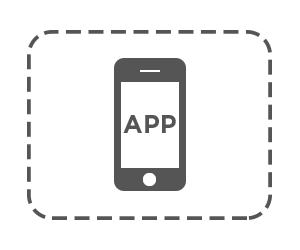
<style>
.page{position:relative;width:300px;height:250px;background:#ffffff}
.page>*{position:absolute;margin:0}
.t1{font:25px "Gotham-Bold";color:#555555}
</style>
<div class="page">
<p class="t1" style="left:123px;top:115px;width:53px;height:18px">APP</p>
</div>
